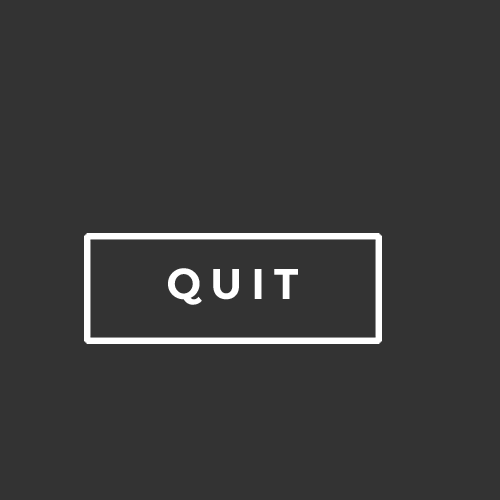
<style>
.page{position:relative;width:500px;height:500px;background:#333333}
.page>*{position:absolute;margin:0}
.t1{font:42.9px "Montserrat-Bold";letter-spacing:0.2em;color:#ffffff;text-transform:uppercase}
</style>
<div class="page">
<p class="t1" style="left:168px;top:268px;width:130px;height:37px">QUIT</p>
</div>
